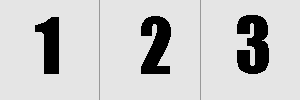
<style>
.page{position:relative;width:300px;height:100px;background:#e5e5e5}
.page>*{position:absolute;margin:0}
.t1{font:72px "Impact";color:#000000}
</style>
<div class="page">
<p class="t1" style="left:35px;top:17px;width:24px;height:57px">1</p>
<p class="t1" style="left:141px;top:16px;width:30px;height:58px">2</p>
<p class="t1" style="left:237px;top:15px;width:32px;height:59px">3</p>
</div>
